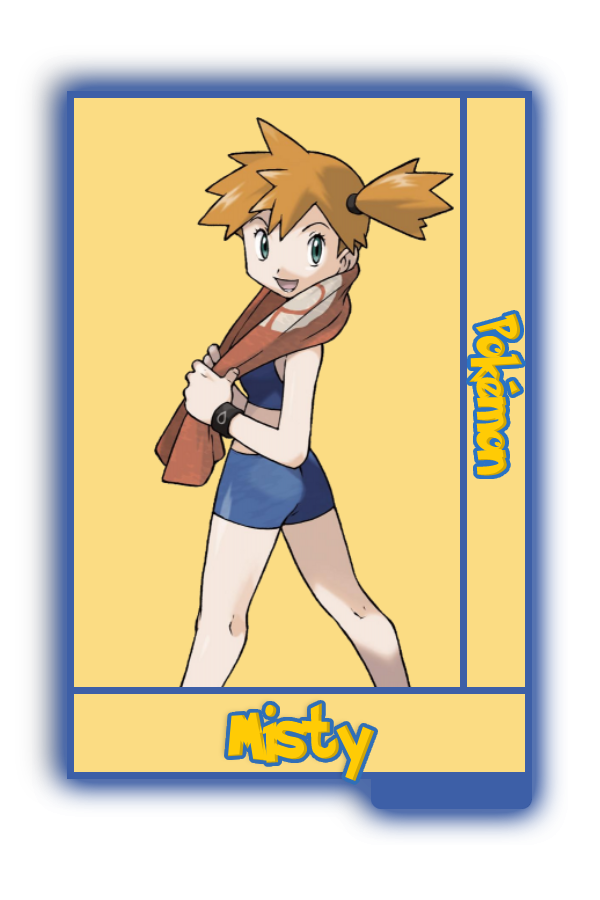
<style>
.page{position:relative;width:600px;height:900px;background:#fbdc83}
.page>*{position:absolute;margin:0}
.t1{font:48.8px "PokemonSolidNormal";color:#ffcb05;scale:0.8 1}
.t2{font:56.6px "PokemonSolidNormal";color:#ffcb05;scale:0.92 1}
</style>
<div class="page">
<p class="t1" style="left:469px;top:313px;width:54px;height:163px;rotate:90deg">Pokémon</p>
<p class="t2" style="left:227px;top:703px;width:148px;height:78px">Misty</p>
</div>
